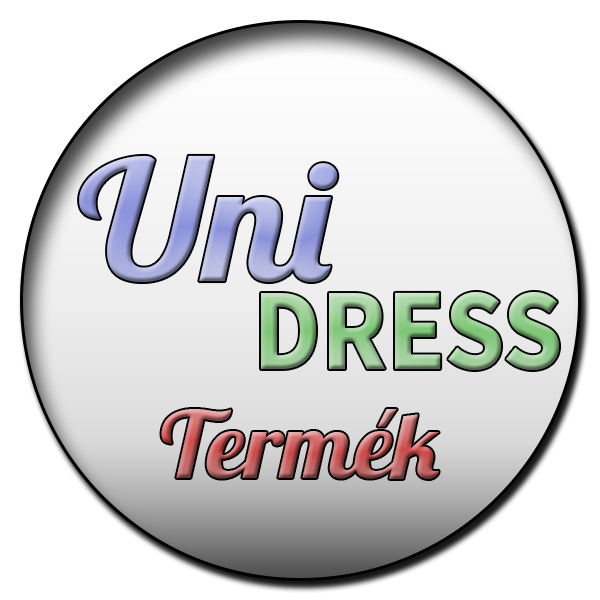
<style>
.page{position:relative;width:600px;height:600px;background:#ffffff}
.page>*{position:absolute;margin:0}
.t1{font:167px "Lobster-Regular";scale:1.05 1}
.t2{font:93px "Lobster-Regular";scale:1.05 1}
</style>
<div class="page">
<p class="t1" style="left:79px;top:155px;width:259px;height:127px">Uni</p>
<p class="t2" style="left:161px;top:409px;width:278px;height:70px">Termék</p>
</div>
